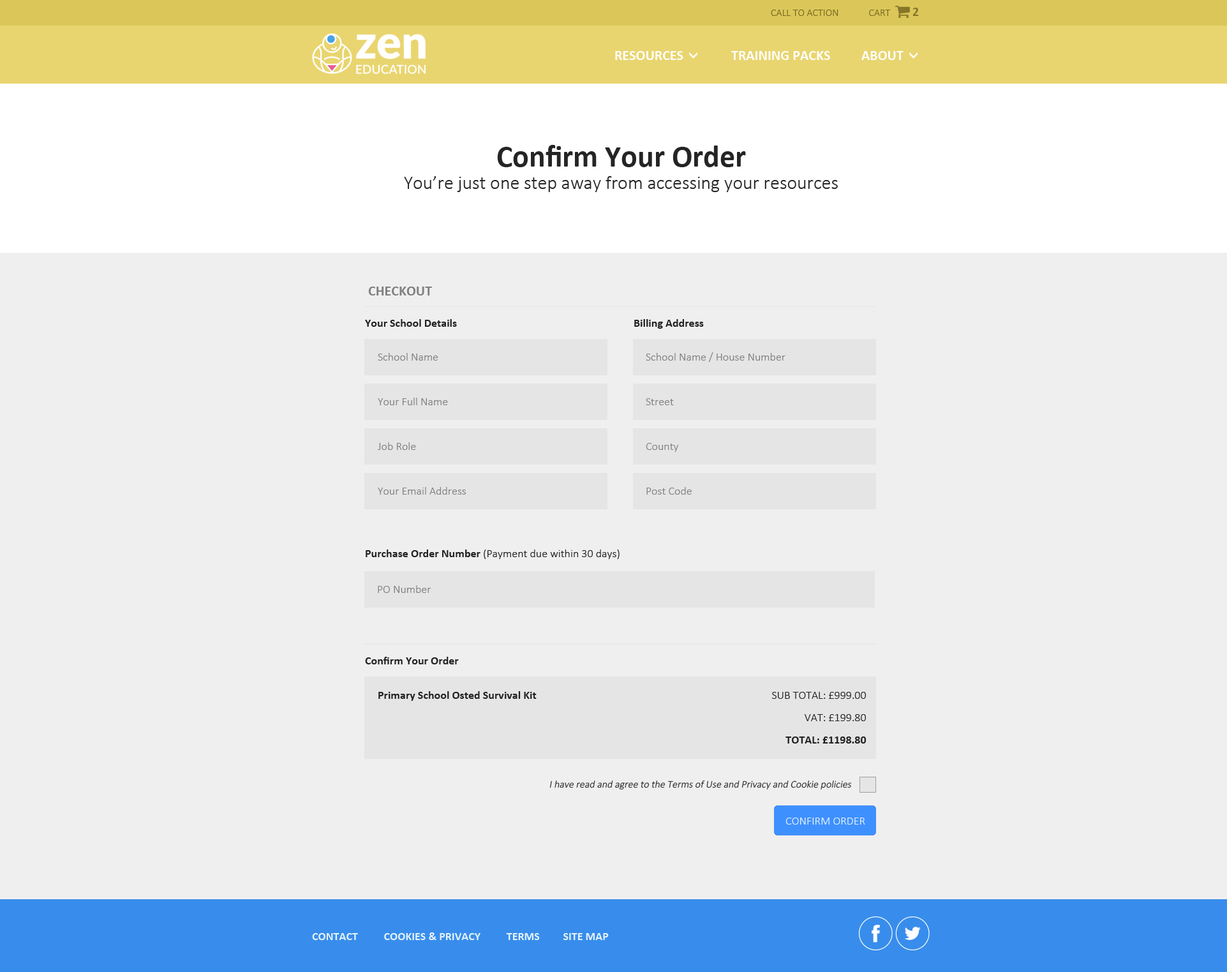
<style>
.page{position:relative;width:1227px;height:972px;background:#efefef}
.page>*{position:absolute;margin:0}
.t1{font:10.2px "Calibri-Light";color:#76681e}
.t2{font:12.8px "Calibri-Bold";color:#867627}
.t3{font:14px "Calibri-Bold";color:#ffffff}
.t4{font:19.1px/22.3px "Calibri-Light";color:#252525}
.t5{font:30.6px/28.7px "Calibri-Bold";color:#252525}
.t6{font:14px "Calibri-Bold";color:#808080}
.t7{font:11.5px "Calibri-Bold";color:#222222}
.t8{font:11.5px "Calibri-Light";color:#808080}
.t9{font:11.5px "Calibri-Light";color:#222222}
.t10{font:11.5px/22.3px "Calibri-Light";color:#222222}
.t11{font:11.5px/22.3px "Calibri-Bold";color:#222222}
.t12{font:10.2px "Calibri-Light";color:#222222;font-style:italic}
.t13{font:11.5px "Calibri-Light";color:#e4f2fc}
.t14{font:11.5px "Calibri-Bold";color:#e4f2fc}
</style>
<div class="page">
<p class="t1" style="left:771px;top:10px;width:120px;height:6px">CALL TO ACTION             CART</p>
<p class="t2" style="left:912px;top:8px;width:7px;height:8px">2</p>
<p class="t3" style="left:615px;top:51px;width:68px;height:9px">RESOURCES</p>
<p class="t3" style="left:731px;top:51px;width:99px;height:9px">TRAINING PACKS</p>
<p class="t3" style="left:861px;top:51px;width:43px;height:9px">ABOUT</p>
<p class="t4" style="left:404px;top:145px;width:434px;height:47px;text-align:center"><span class="t5">Confirm Your Order<br></span>You’re just one step away from accessing your resources</p>
<p class="t6" style="left:368px;top:286px;width:64px;height:9px">CHECKOUT</p>
<p class="t7" style="left:365px;top:319px;width:92px;height:8px">Your School Details</p>
<p class="t7" style="left:634px;top:319px;width:70px;height:10px">Billing Address</p>
<p class="t8" style="left:378px;top:353px;width:60px;height:8px">School Name</p>
<p class="t8" style="left:646px;top:352px;width:139px;height:10px">School Name / House Number</p>
<p class="t8" style="left:378px;top:398px;width:70px;height:7px">Your Full Name</p>
<p class="t8" style="left:646px;top:398px;width:28px;height:7px">Street</p>
<p class="t8" style="left:378px;top:442px;width:38px;height:8px">Job Role</p>
<p class="t8" style="left:646px;top:443px;width:33px;height:9px">County</p>
<p class="t8" style="left:378px;top:487px;width:88px;height:8px">Your Email Address</p>
<p class="t8" style="left:646px;top:487px;width:46px;height:8px">Post Code</p>
<p class="t9" style="left:366px;top:549px;width:254px;height:10px"><span class="t7">Purchase Order Number </span>(Payment due within 30 days)</p>
<p class="t8" style="left:378px;top:585px;width:53px;height:8px">PO Number</p>
<p class="t7" style="left:365px;top:657px;width:94px;height:7px">Confirm Your Order</p>
<p class="t7" style="left:378px;top:691px;width:159px;height:10px">Primary School Osted Survival Kit</p>
<p class="t10" style="left:772px;top:692px;width:95px;height:51px;text-align:right">SUB TOTAL: £999.00<br>VAT: £199.80<br><span class="t11">TOTAL: £1198.80</span></p>
<p class="t12" style="left:549px;top:780px;width:303px;height:9px">I have read and agree to the Terms of Use and Privacy and Cookie policies</p>
<p class="t13" style="left:785px;top:817px;width:80px;height:7px">CONFIRM ORDER</p>
<p class="t14" style="left:312px;top:932px;width:297px;height:8px">CONTACT          COOKIES &amp; PRIVACY          TERMS         SITE MAP</p>
</div>
